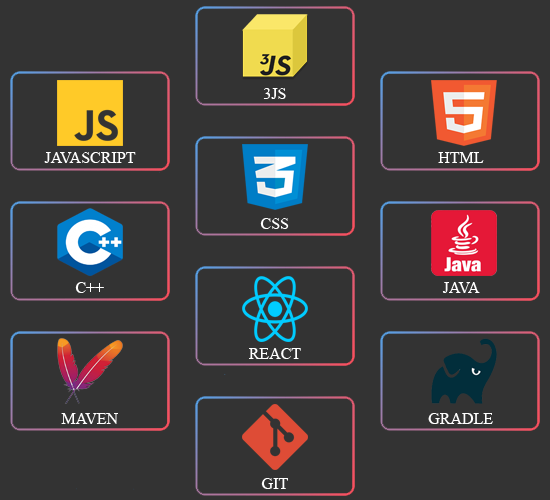
<style>
.page{position:relative;width:550px;height:500px;background:#333333}
.page>*{position:absolute;margin:0}
.t1{font:16px "TimesNewRomanPSMT";color:#ffffff}
</style>
<div class="page">
<p class="t1" style="left:263px;top:88px;width:23px;height:11px">3JS</p>
<p class="t1" style="left:44px;top:152px;width:92px;height:11px">JAVASCRIPT</p>
<p class="t1" style="left:438px;top:152px;width:46px;height:11px">HTML</p>
<p class="t1" style="left:260px;top:218px;width:29px;height:11px">CSS</p>
<p class="t1" style="left:75px;top:282px;width:29px;height:11px">C++</p>
<p class="t1" style="left:442px;top:282px;width:38px;height:11px">JAVA</p>
<p class="t1" style="left:249px;top:348px;width:52px;height:11px">REACT</p>
<p class="t1" style="left:61px;top:413px;width:57px;height:11px">MAVEN</p>
<p class="t1" style="left:428px;top:413px;width:65px;height:11px">GRADLE</p>
<p class="t1" style="left:261px;top:478px;width:27px;height:11px">GIT</p>
</div>
